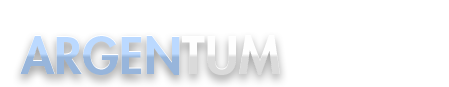
<style>
.page{position:relative;width:449px;height:87px;background:#ffffff}
.page>*{position:absolute;margin:0}
.t1{font:72px "Futura-Heavy";font-variant:small-caps}
</style>
<div class="page">
<p class="t1" style="left:20px;top:35px;width:260px;height:40px">argentum</p>
</div>
